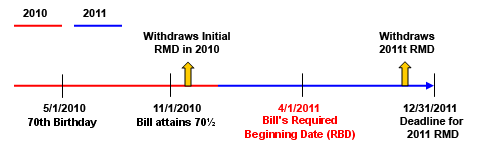
<style>
.page{position:relative;width:490px;height:159px;background:#ffffff}
.page>*{position:absolute;margin:0}
.t1{font:11px "Arial-BoldMT";color:#000000}
.t2{font:11px "Arial-BoldMT";color:#fe0000}
</style>
<div class="page">
<p class="t1" style="left:23px;top:9px;width:24px;height:8px">2010</p>
<p class="t1" style="left:83px;top:9px;width:23px;height:8px">2011</p>
<p class="t1" style="left:143px;top:32px;width:87px;height:21px;text-align:center">Withdraws Initial<br>RMD in 2010</p>
<p class="t1" style="left:379px;top:32px;width:56px;height:21px;text-align:center">Withdraws<br>2011t RMD</p>
<p class="t1" style="left:43px;top:104px;width:43px;height:8px">5/1/2010</p>
<p class="t1" style="left:153px;top:104px;width:48px;height:8px">11/1/2010</p>
<p class="t2" style="left:278px;top:104px;width:41px;height:8px">4/1/2011</p>
<p class="t1" style="left:403px;top:104px;width:53px;height:8px">12/31/2011</p>
<p class="t1" style="left:400px;top:117px;width:64px;height:21px;text-align:center">Deadline for <br>2011 RMD</p>
</div>
